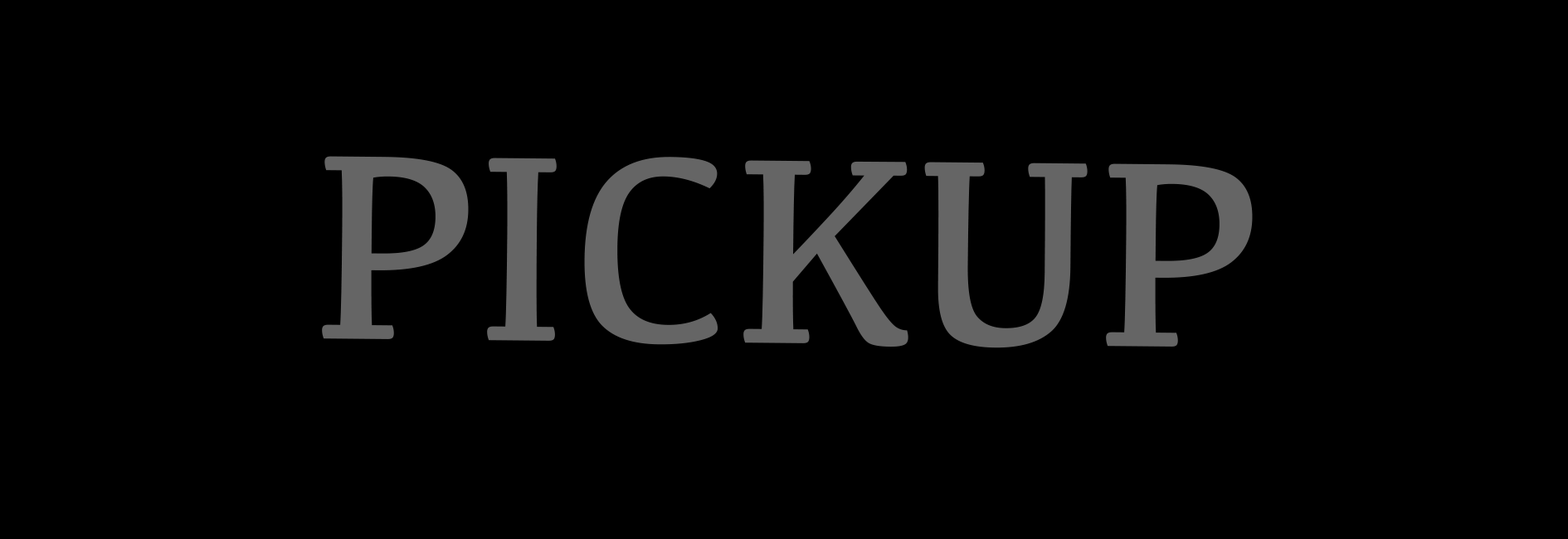
<style>
.page{position:relative;width:1568px;height:539px;background:#000000}
.page>*{position:absolute;margin:0}
.t1{font:273.4px "Kefa-Regular";color:#656565}
</style>
<div class="page">
<p class="t1" style="left:322px;top:156px;width:931px;height:192px;rotate:1deg">PICKUP</p>
</div>
